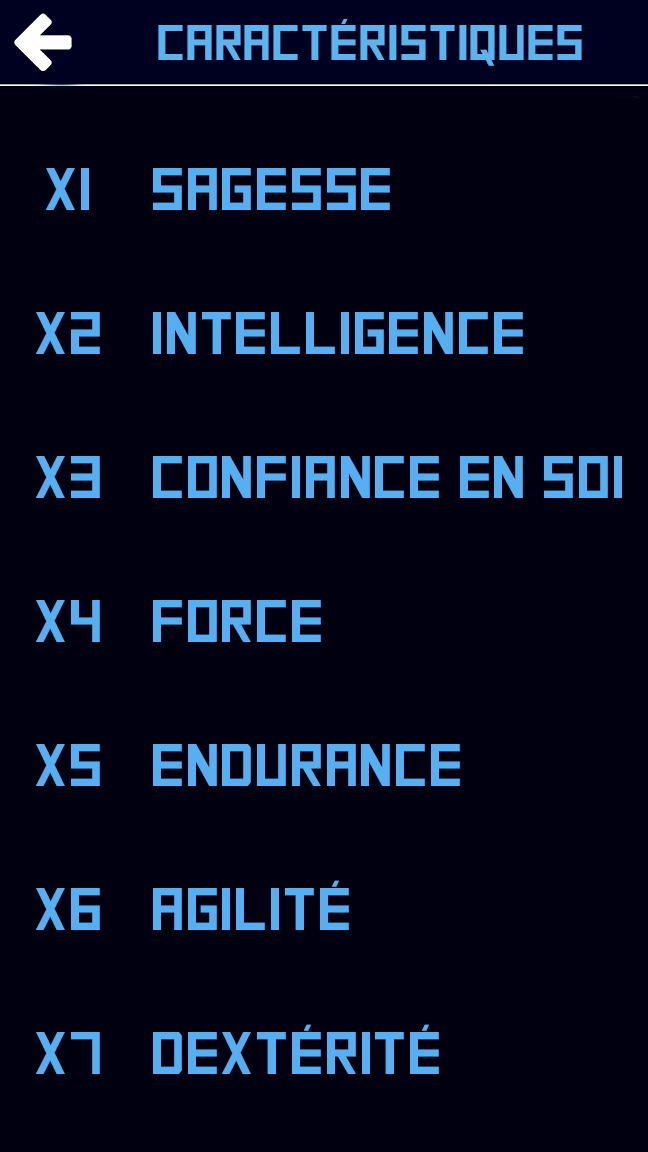
<style>
.page{position:relative;width:648px;height:1152px;background:#000010}
.page>*{position:absolute;margin:0}
.t1{font:50px "SquareFont";color:#5ab4f0}
.t2{font:60px "SquareFont";color:#55aff0}
</style>
<div class="page">
<p class="t1" style="left:158px;top:19px;width:424px;height:47px">CARActéristiques</p>
<p class="t2" style="left:36px;top:168px;width:64px;height:906px;text-align:center">X1<br><br>X2<br><br>X3<br><br>X4<br><br>X5<br><br>X6<br><br>X7</p>
<p class="t2" style="left:153px;top:168px;width:469px;height:906px">Sagesse<br><br>Intelligence<br><br>Confiance en soi<br><br>force<br><br>endurance<br><br>agilité<br><br>dextérité</p>
</div>
